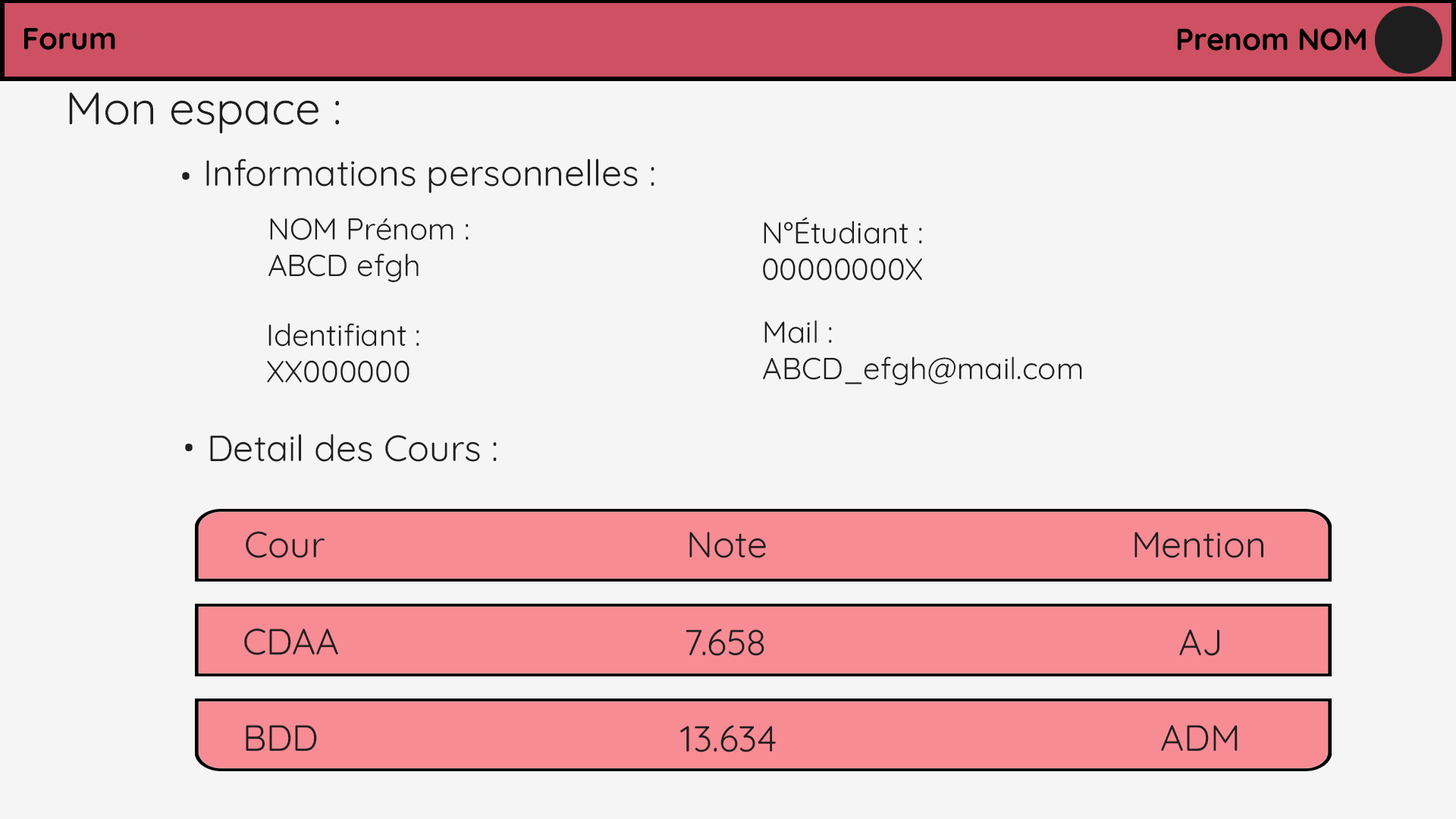
<style>
.page{position:relative;width:1456px;height:819px;background:#f5f5f5}
.page>*{position:absolute;margin:0}
.t1{font:45.5px "Quicksand-Regular";color:#1f1e1f}
.t2{font:36.4px "Quicksand-Regular";color:#1f1e1f}
.t3{font:54.6px "Quicksand-Bold";color:#1f1e1f}
.t4{font:30.3px "Quicksand-Regular";color:#1f1e1f}
</style>
<div class="page">
<p class="t1" style="left:69px;top:93px;width:270px;height:40px">Mon espace :</p>
<p class="t2" style="left:206px;top:158px;width:448px;height:35px">Informations personnelles :</p>
<p class="t3" style="left:182px;top:172px;width:8px;height:8px">.</p>
<p class="t4" style="left:268px;top:218px;width:201px;height:65px">NOM Prénom :<br>ABCD efgh</p>
<p class="t4" style="left:763px;top:217px;width:159px;height:64px">N°Étudiant :<br>00000000X</p>
<p class="t4" style="left:267px;top:323px;width:152px;height:60px">Identifiant :<br>XX000000</p>
<p class="t4" style="left:763px;top:320px;width:319px;height:66px">Mail :<br>ABCD_efgh@mail.com</p>
<p class="t2" style="left:210px;top:434px;width:287px;height:28px">Detail des Cours :</p>
<p class="t3" style="left:185px;top:444px;width:8px;height:7px">.</p>
<p class="t2" style="left:246px;top:531px;width:79px;height:27px">Cour</p>
<p class="t2" style="left:689px;top:532px;width:77px;height:26px">Note</p>
<p class="t2" style="left:1134px;top:532px;width:130px;height:26px">Mention</p>
<p class="t2" style="left:244px;top:628px;width:94px;height:27px">CDAA</p>
<p class="t2" style="left:686px;top:629px;width:78px;height:27px">7.658</p>
<p class="t2" style="left:1179px;top:629px;width:41px;height:27px">AJ</p>
<p class="t2" style="left:246px;top:725px;width:71px;height:26px">BDD</p>
<p class="t2" style="left:680px;top:725px;width:96px;height:27px">13.634</p>
<p class="t2" style="left:1161px;top:725px;width:77px;height:26px">ADM</p>
</div>
